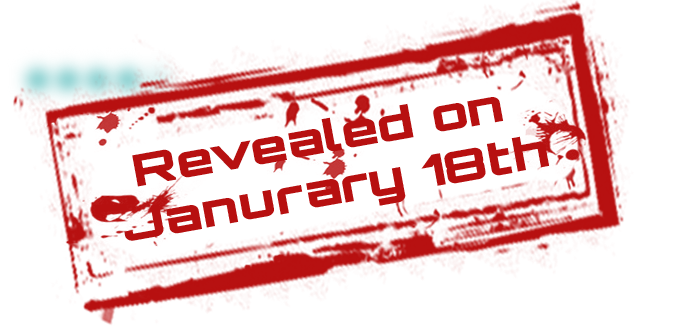
<style>
.page{position:relative;width:699px;height:326px;background:#ffffff}
.page>*{position:absolute;margin:0}
.t1{font:43.9px "Orbitron-Black";color:#b71010;scale:1.23 1}
</style>
<div class="page">
<p class="t1" style="left:124px;top:97px;width:426px;height:144px;text-align:center;rotate:-10deg">Revealed on <br>Janurary 18th</p>
</div>
